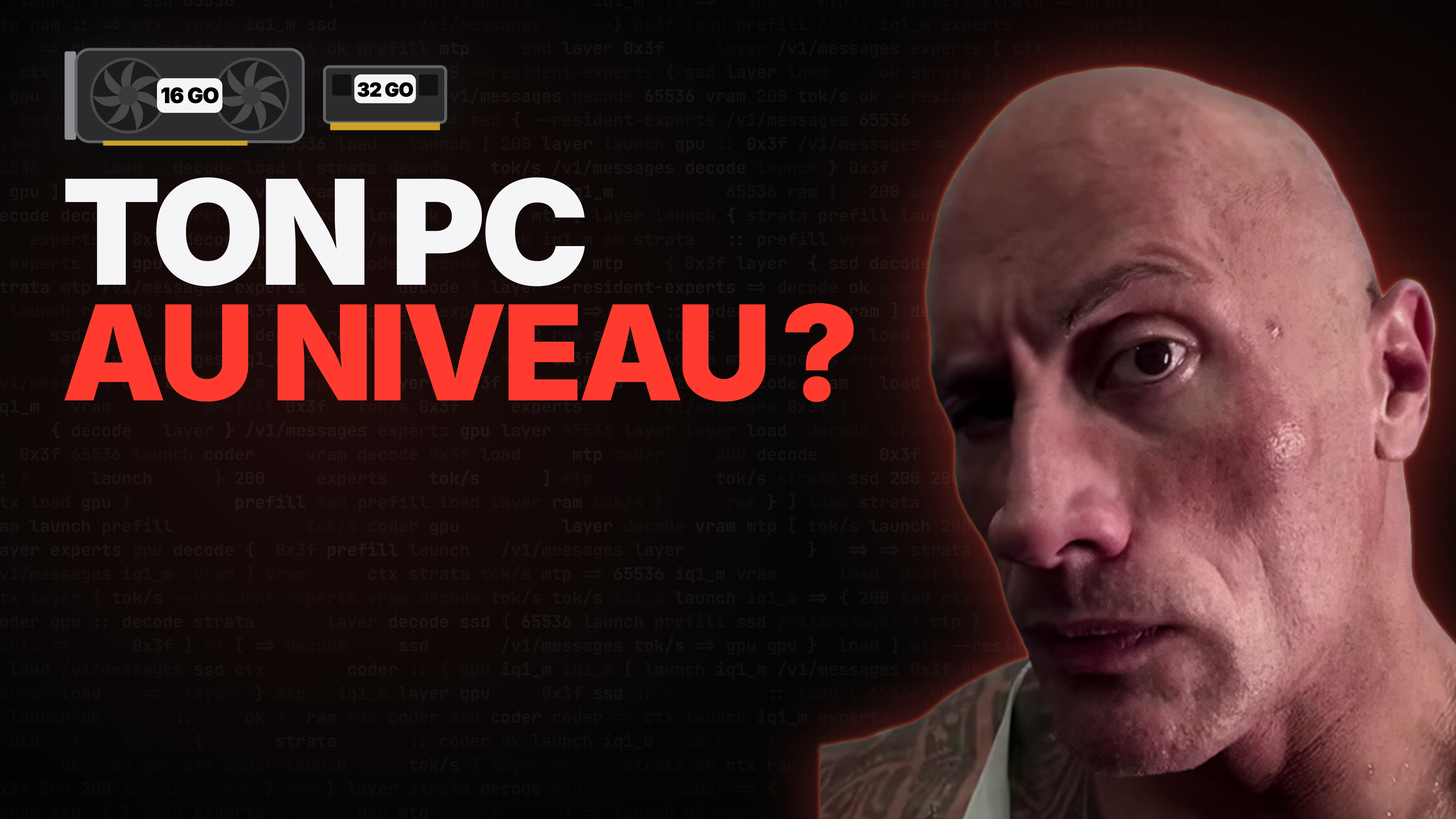
<style>
.page{position:relative;width:1456px;height:819px}
.page>*{position:absolute;margin:0}
.t1{font:145.6px "Inter-Black";letter-spacing:-0.035em;color:#f5f5f7}
.t2{font:131.9px "Inter-Black";letter-spacing:-0.035em;color:#ff3b30}
</style>
<div class="page">
<p class="t1" style="left:65px;top:177px;width:520px;height:110px">TON PC</p>
<p class="t2" style="left:64px;top:303px;width:790px;height:100px">AU NIVEAU ?</p>
</div>
